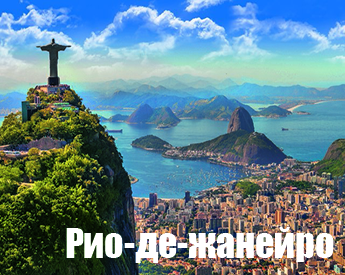
<style>
.page{position:relative;width:345px;height:275px}
.page>*{position:absolute;margin:0}
.t1{font:37.5px "Impact";color:#ffffff}
</style>
<div class="page">
<p class="t1" style="left:66px;top:227px;width:268px;height:36px">Рио-де-жанейро</p>
</div>
